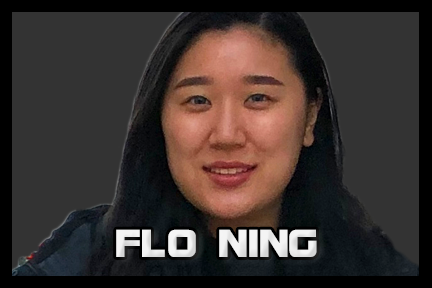
<style>
.page{position:relative;width:432px;height:288px;background:#333333}
.page>*{position:absolute;margin:0}
.t1{font:41.7px "BolsterBold";color:#f3f3f3}
</style>
<div class="page">
<p class="t1" style="left:116px;top:229px;width:201px;height:28px">FLO NING</p>
</div>
